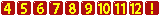
<style>
.page{position:relative;width:160px;height:16px;background:#ae0e0e}
.page>*{position:absolute;margin:0}
.t1{font:16.7px "MyriadPro-Bold";color:#fcff0f;scale:0.9 1}
.t2{font:16.7px "MyriadPro-Bold";letter-spacing:-0.15em;color:#fcff0f;scale:0.9 1}
</style>
<div class="page">
<p class="t1" style="left:4px;top:3px;width:7px;height:11px">4</p>
<p class="t1" style="left:21px;top:3px;width:6px;height:11px">5</p>
<p class="t1" style="left:37px;top:3px;width:7px;height:11px">6</p>
<p class="t1" style="left:53px;top:3px;width:7px;height:11px">7</p>
<p class="t1" style="left:69px;top:3px;width:7px;height:11px">8</p>
<p class="t1" style="left:85px;top:3px;width:7px;height:11px">9</p>
<p class="t2" style="left:98px;top:3px;width:12px;height:11px">10</p>
<p class="t2" style="left:115px;top:3px;width:10px;height:11px">11</p>
<p class="t2" style="left:130px;top:3px;width:11px;height:11px">12</p>
<p class="t1" style="left:151px;top:2px;width:2px;height:12px">!</p>
</div>
